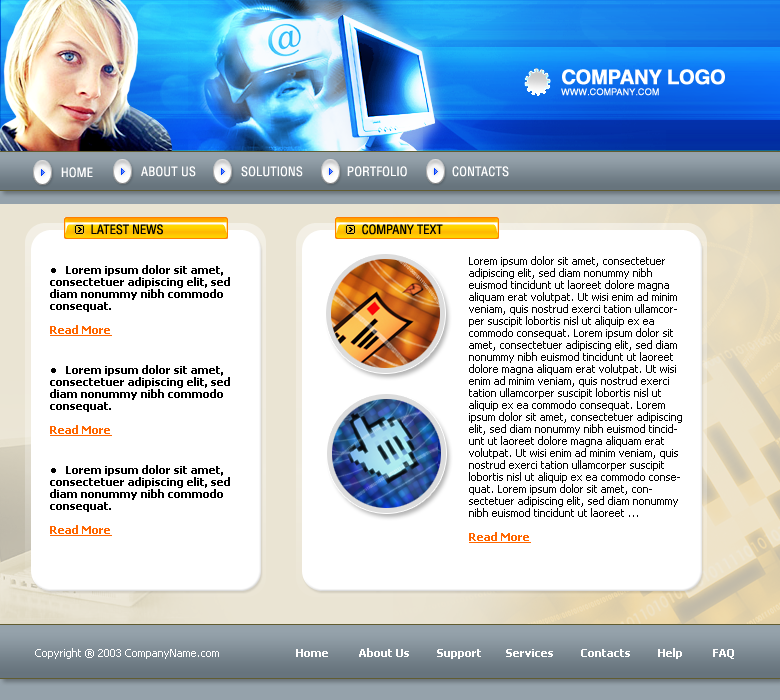
<style>
.page{position:relative;width:780px;height:700px;background:#ffffff}
.page>*{position:absolute;margin:0}
.t1{font:9px "Helios";letter-spacing:-0.02em;color:#ffffff;font-weight:bold}
.t2{font:20px "Helios-Bold";letter-spacing:-0.04em;color:#ffffff;font-weight:bold}
.t3{font:13px "HeliosCond";letter-spacing:0.02em;color:#ffffff}
.t4{font:13px "HeliosCond";color:#000000}
.t5{font:11px/12px "Tahoma";color:#000000}
.t6{font:11px/12px "Tahoma-Bold";color:#ff6600;text-decoration:underline}
.t7{font:11px/12px "Tahoma-Bold";color:#000000}
.t8{font:11px "Tahoma";color:#ffffff}
.t9{font:11px "Tahoma-Bold";color:#ffffff}
</style>
<div class="page">
<p class="t1" style="left:561px;top:69px;width:164px;height:27px"><span class="t2">COMPANY LOGO<br></span>WWW.COMPANY.COM</p>
<p class="t3" style="left:61px;top:167px;width:32px;height:11px">HOME</p>
<p class="t3" style="left:141px;top:166px;width:55px;height:11px">ABOUT US</p>
<p class="t3" style="left:241px;top:166px;width:62px;height:11px">SOLUTIONS</p>
<p class="t3" style="left:347px;top:166px;width:60px;height:11px">PORTFOLIO</p>
<p class="t3" style="left:452px;top:166px;width:57px;height:11px">CONTACTS</p>
<p class="t4" style="left:91px;top:224px;width:72px;height:11px">LATEST NEWS</p>
<p class="t4" style="left:362px;top:224px;width:81px;height:11px">COMPANY TEXT</p>
<p class="t5" style="left:469px;top:256px;width:213px;height:287px">Lorem ipsum dolor sit amet, consectetuer adipiscing elit, sed diam nonummy nibh euismod tincidunt ut laoreet dolore magna aliquam erat volutpat. Ut wisi enim ad minim veniam, quis nostrud exerci tation ullamcorper suscipit lobortis nisl ut aliquip ex ea commodo consequat. Lorem ipsum dolor sit amet, consectetuer adipiscing elit, sed diam nonummy nibh euismod tincidunt ut laoreet dolore magna aliquam erat volutpat. Ut wisi enim ad minim veniam, quis nostrud exerci tation ullamcorper suscipit lobortis nisl ut aliquip ex ea commodo consequat. Lorem ipsum dolor sit amet, consectetuer adipiscing elit, sed diam nonummy nibh euismod tincidunt ut laoreet dolore magna aliquam erat volutpat. Ut wisi enim ad minim veniam, quis nostrud exerci tation ullamcorper suscipit lobortis nisl ut aliquip ex ea commodo consequat. Lorem ipsum dolor sit amet, consectetuer adipiscing elit, sed diam nonummy nibh euismod tincidunt ut laoreet ...<br><br><span class="t6">Read More</span></p>
<p class="t7" style="left:50px;top:265px;width:180px;height:71px"><span class="t5">●   </span>Lorem ipsum dolor sit amet, consectetuer adipiscing elit, sed diam nonummy nibh commodo consequat.<br><br><span class="t6">Read More</span></p>
<p class="t7" style="left:50px;top:365px;width:180px;height:71px"><span class="t5">●   </span>Lorem ipsum dolor sit amet, consectetuer adipiscing elit, sed diam nonummy nibh commodo consequat.<br><br><span class="t6">Read More</span></p>
<p class="t7" style="left:50px;top:465px;width:180px;height:71px"><span class="t5">●   </span>Lorem ipsum dolor sit amet, consectetuer adipiscing elit, sed diam nonummy nibh commodo consequat.<br><br><span class="t6">Read More</span></p>
<p class="t8" style="left:35px;top:648px;width:184px;height:11px">Copyright ® 2003 CompanyName.com</p>
<p class="t9" style="left:296px;top:648px;width:438px;height:11px">Home          About Us         Support        Services         Contacts         Help          FAQ</p>
</div>
